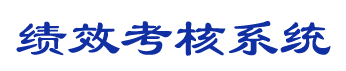
<style>
.page{position:relative;width:346px;height:71px;background:#ffffff}
.page>*{position:absolute;margin:0}
.t1{font:53px "LiSu";color:#102fa3}
</style>
<div class="page">
<p class="t1" style="left:16px;top:21px;width:315px;height:35px">绩效考核系统</p>
</div>
